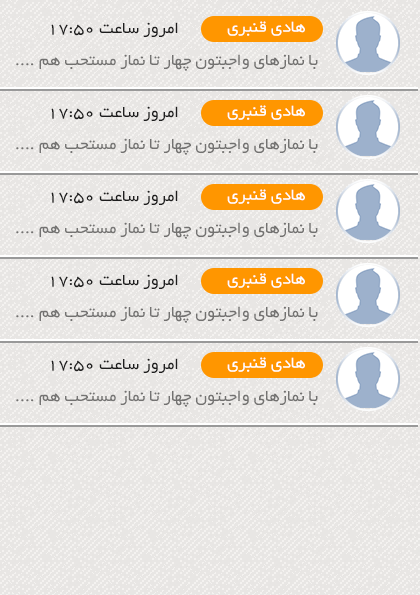
<style>
.page{position:relative;width:420px;height:595px;background:#e8e6e4}
.page>*{position:absolute;margin:0}
.t1{font:18px "BYekan";color:#1e1e1e}
.t2{font:18px "BYekan";color:#ffffff}
.t3{font:18px "BYekan";color:#727170}
</style>
<div class="page">
<p class="t1" style="left:51px;top:22px;width:127px;height:15px">امروز ساعت 17:50</p>
<p class="t2" style="left:227px;top:21px;width:78px;height:15px">هادی قنبری</p>
<p class="t3" style="left:16px;top:54px;width:302px;height:17px">با نمازهای واجبتون چهار تا نماز مستحب هم ....</p>
<p class="t1" style="left:51px;top:106px;width:127px;height:15px">امروز ساعت 17:50</p>
<p class="t2" style="left:227px;top:105px;width:78px;height:15px">هادی قنبری</p>
<p class="t3" style="left:16px;top:138px;width:302px;height:17px">با نمازهای واجبتون چهار تا نماز مستحب هم ....</p>
<p class="t1" style="left:51px;top:190px;width:127px;height:15px">امروز ساعت 17:50</p>
<p class="t2" style="left:227px;top:189px;width:78px;height:15px">هادی قنبری</p>
<p class="t3" style="left:16px;top:222px;width:302px;height:17px">با نمازهای واجبتون چهار تا نماز مستحب هم ....</p>
<p class="t1" style="left:51px;top:274px;width:127px;height:15px">امروز ساعت 17:50</p>
<p class="t2" style="left:227px;top:273px;width:78px;height:15px">هادی قنبری</p>
<p class="t3" style="left:16px;top:306px;width:302px;height:17px">با نمازهای واجبتون چهار تا نماز مستحب هم ....</p>
<p class="t1" style="left:51px;top:358px;width:127px;height:15px">امروز ساعت 17:50</p>
<p class="t2" style="left:227px;top:357px;width:78px;height:15px">هادی قنبری</p>
<p class="t3" style="left:16px;top:390px;width:302px;height:17px">با نمازهای واجبتون چهار تا نماز مستحب هم ....</p>
</div>
